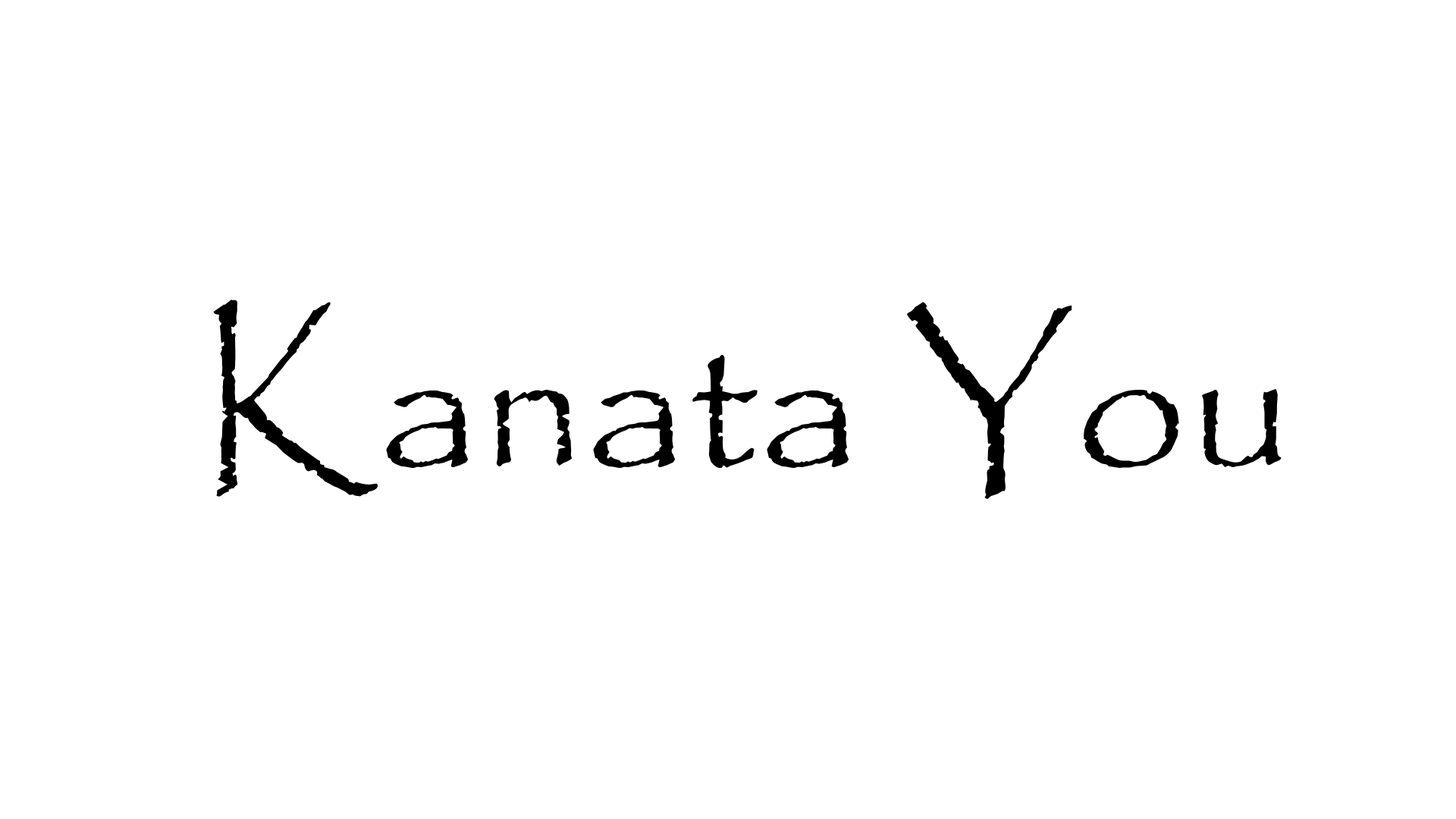
<style>
.page{position:relative;width:1456px;height:819px;background:#ffffff}
.page>*{position:absolute;margin:0}
.t1{font:202.3px "Papyrus-Regular";color:#000000}
</style>
<div class="page">
<p class="t1" style="left:213px;top:300px;width:1069px;height:199px">Kanata You</p>
</div>
